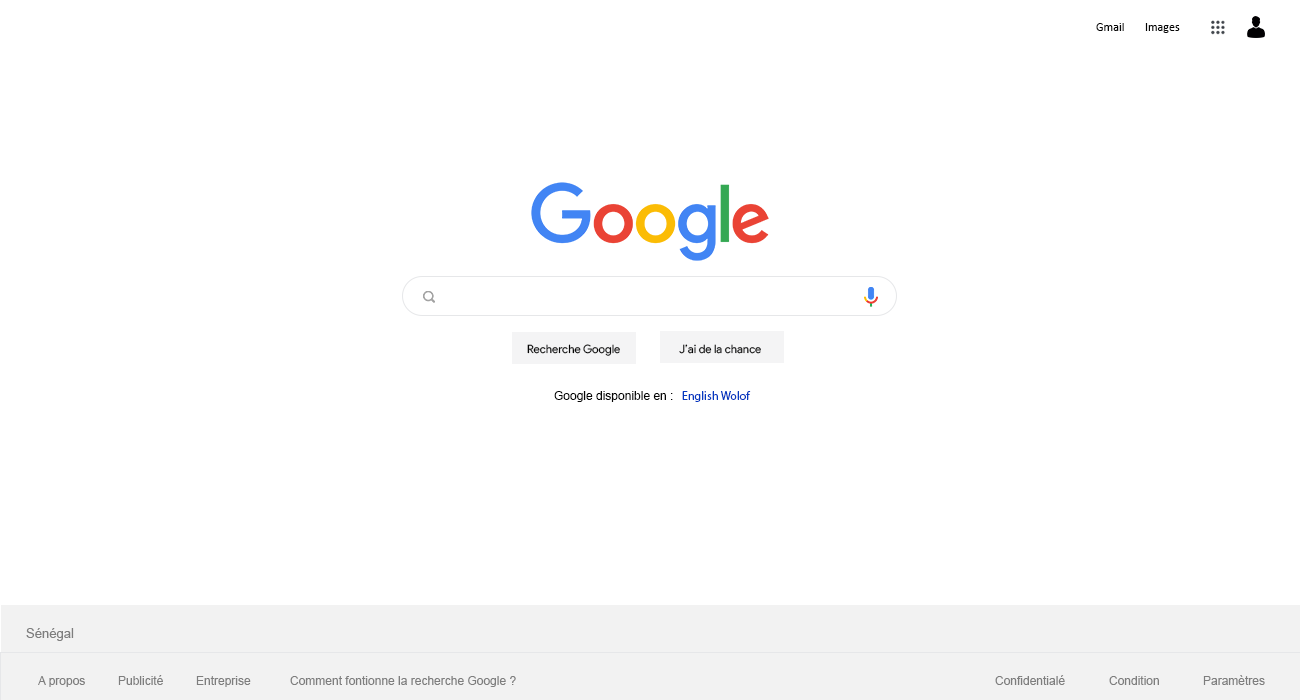
<style>
.page{position:relative;width:1300px;height:700px;background:#ffffff}
.page>*{position:absolute;margin:0}
.t1{font:12px "Calibri";color:#050505}
.t2{font:11.5px "ProductSans-Regular";color:#070707}
.t3{font:12px "ArialMT";color:#070707}
.t4{font:12px "MyriadPro-Regular";color:#0539c1}
.t5{font:13px "ArialMT";color:#7e7e7e}
.t6{font:12px "ArialMT";color:#7e7e7e}
</style>
<div class="page">
<p class="t1" style="left:1096px;top:23px;width:28px;height:8px">Gmail</p>
<p class="t1" style="left:1145px;top:23px;width:35px;height:10px">Images</p>
<p class="t2" style="left:527px;top:344px;width:93px;height:12px">Recherche Google</p>
<p class="t2" style="left:679px;top:344px;width:82px;height:10px">J’ai de la chance</p>
<p class="t3" style="left:554px;top:391px;width:119px;height:11px">Google disponible en :</p>
<p class="t4" style="left:682px;top:391px;width:69px;height:11px">English Wolof</p>
<p class="t5" style="left:26px;top:628px;width:48px;height:13px">Sénégal</p>
<p class="t6" style="left:38px;top:676px;width:47px;height:11px">A propos</p>
<p class="t6" style="left:118px;top:675px;width:45px;height:10px">Publicité</p>
<p class="t6" style="left:196px;top:676px;width:55px;height:11px">Entreprise</p>
<p class="t6" style="left:290px;top:676px;width:226px;height:11px">Comment fontionne la recherche Google ?</p>
<p class="t6" style="left:995px;top:675px;width:70px;height:10px">Confidentialé</p>
<p class="t6" style="left:1109px;top:676px;width:50px;height:9px">Condition</p>
<p class="t6" style="left:1203px;top:675px;width:62px;height:10px">Paramètres</p>
</div>
